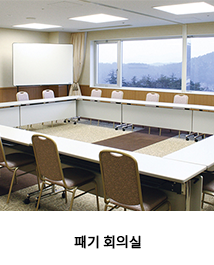
<style>
.page{position:relative;width:214px;height:265px;background:#ffffff}
.page>*{position:absolute;margin:0}
.t1{font:14px "NotoSansCJKkr-Regular";letter-spacing:-0.025em;color:#000000;font-weight:bold}
</style>
<div class="page">
<p class="t1" style="left:74px;top:235px;width:67px;height:14px">패기 회의실</p>
</div>
